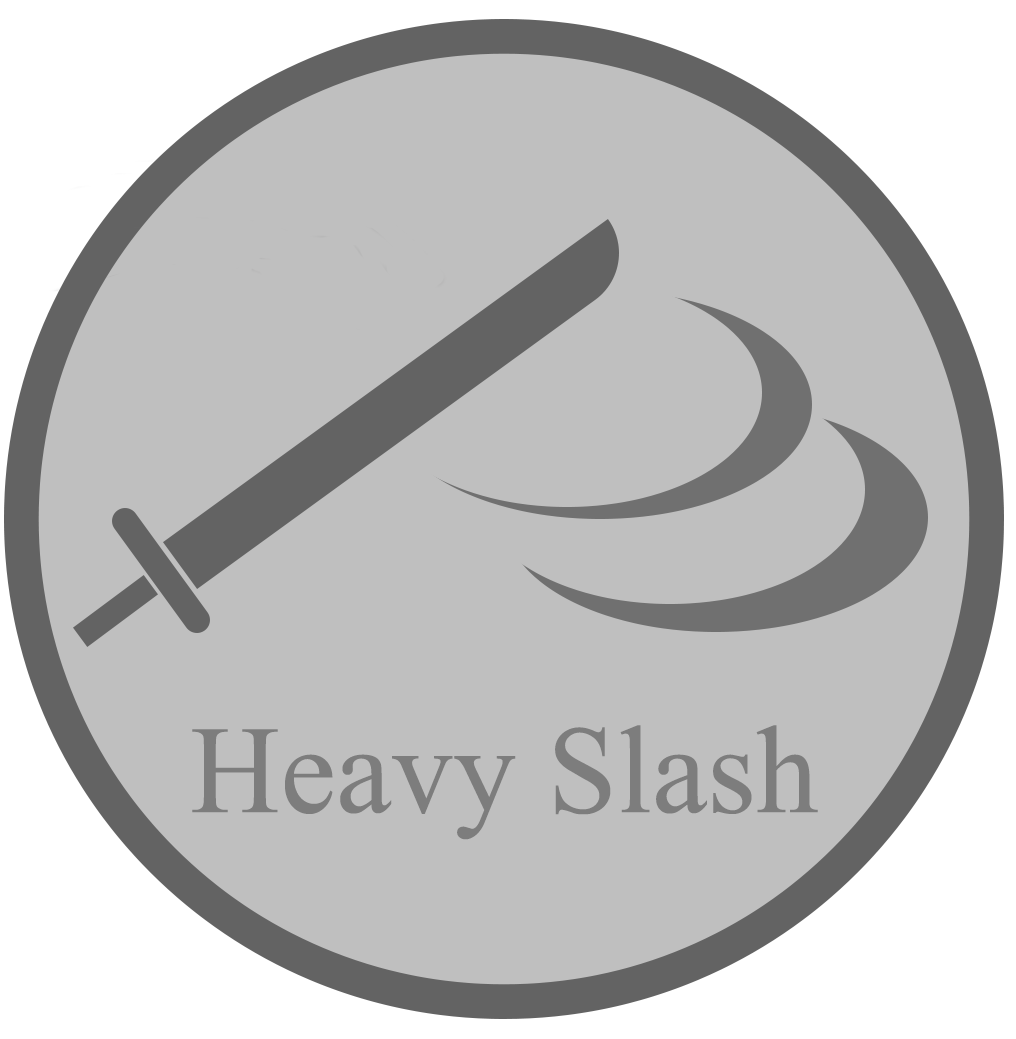
<style>
.page{position:relative;width:1016px;height:1039px;background:#bfbfbf}
.page>*{position:absolute;margin:0}
.t1{font:125px "MongolianBaiti";color:#7d7d7d}
</style>
<div class="page">
<p class="t1" style="left:192px;top:725px;width:626px;height:115px">Heavy Slash</p>
</div>
